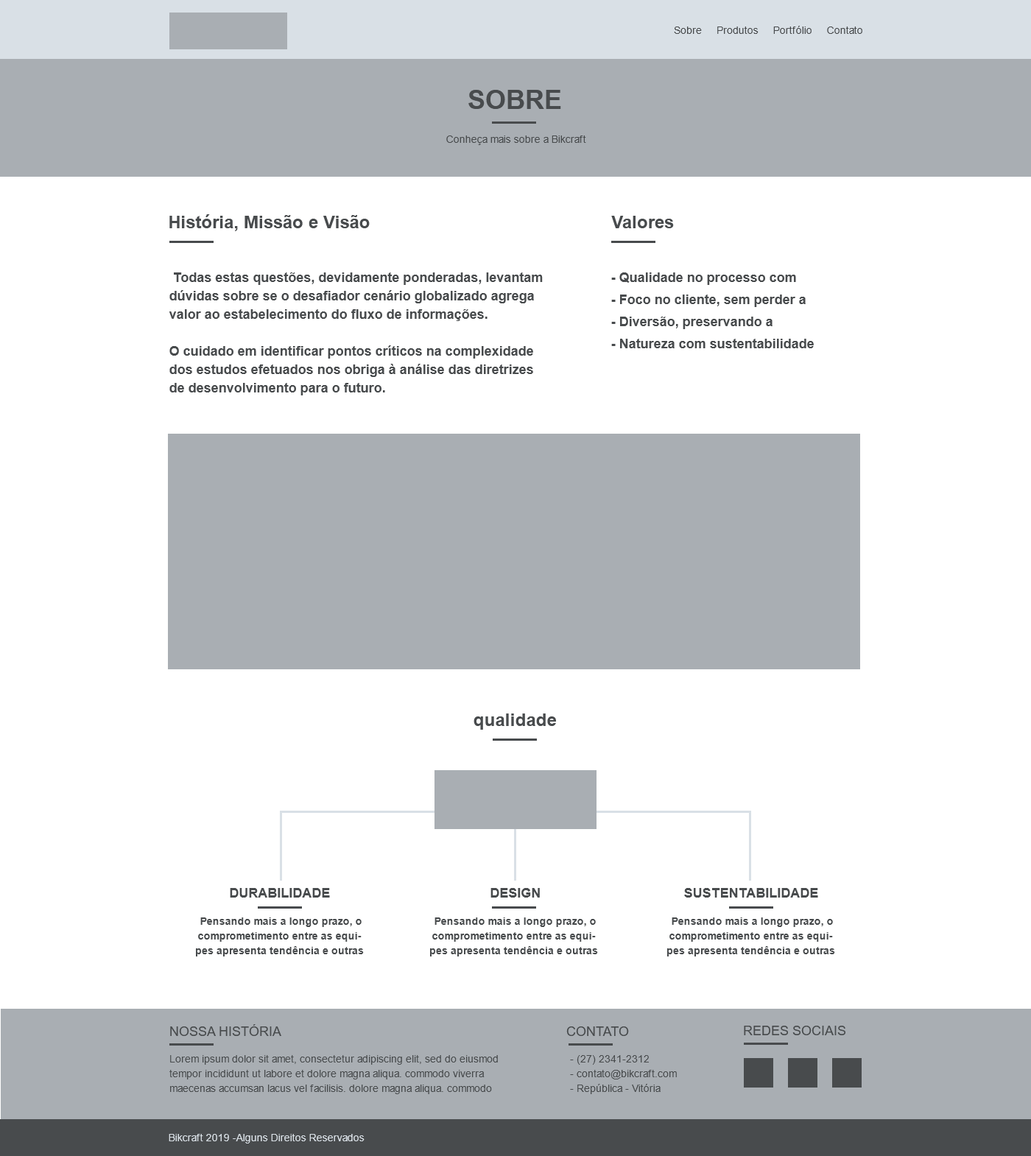
<style>
.page{position:relative;width:1031px;height:1156px;background:#ffffff}
.page>*{position:absolute;margin:0}
.t1{font:10.3px "ArialMT";color:#484b4d}
.t2{font:26.5px "Arial-BoldMT";color:#484b4d;text-transform:uppercase}
.t3{font:17.7px "Arial-BoldMT";color:#484b4d}
.t4{font:13.3px/18.4px "Arial-BoldMT";color:#484b4d}
.t5{font:13.3px/22.1px "Arial-BoldMT";color:#484b4d}
.t6{font:13.3px "Arial-BoldMT";color:#484b4d;text-transform:uppercase}
.t7{font:10.3px/14.7px "Arial-BoldMT";color:#484b4d}
.t8{font:13.3px "ArialMT";color:#484b4d;text-transform:uppercase}
.t9{font:10.3px/14.7px "ArialMT";color:#484b4d}
.t10{font:10.3px "ArialMT";color:#d9e0e6}
</style>
<div class="page">
<p class="t1" style="left:674px;top:26px;width:189px;height:8px">Sobre     Produtos     Portfólio     Contato</p>
<p class="t2" style="left:468px;top:90px;width:93px;height:19px">sobre</p>
<p class="t1" style="left:446px;top:136px;width:140px;height:9px">Conheça mais sobre a Bikcraft</p>
<p class="t3" style="left:169px;top:214px;width:201px;height:17px">História, Missão e Visão</p>
<p class="t3" style="left:611px;top:216px;width:63px;height:12px">Valores</p>
<p class="t4" style="left:169px;top:273px;width:374px;height:123px">Todas estas questões, devidamente ponderadas, levantam dúvidas sobre se o desafiador cenário globalizado agrega valor ao estabelecimento do fluxo de informações. <br><br>O cuidado em identificar pontos críticos na complexidade dos estudos efetuados nos obriga à análise das diretrizes de desenvolvimento para o futuro.</p>
<p class="t5" style="left:611px;top:273px;width:203px;height:75px">- Qualidade no processo com<br>- Foco no cliente, sem perder a<br>- Diversão, preservando a<br>- Natureza com sustentabilidade</p>
<p class="t3" style="left:474px;top:714px;width:82px;height:16px">qualidade</p>
<p class="t6" style="left:230px;top:888px;width:100px;height:10px">durabilidade</p>
<p class="t6" style="left:491px;top:888px;width:49px;height:10px">DESIGN</p>
<p class="t6" style="left:684px;top:888px;width:134px;height:10px">SUSTENTABILIDADE</p>
<p class="t7" style="left:196px;top:918px;width:168px;height:39px;text-align:center">Pensando mais a longo prazo, o comprometimento entre as equipes apresenta tendência e outras</p>
<p class="t7" style="left:430px;top:918px;width:168px;height:39px;text-align:center">Pensando mais a longo prazo, o comprometimento entre as equipes apresenta tendência e outras</p>
<p class="t7" style="left:667px;top:918px;width:168px;height:39px;text-align:center">Pensando mais a longo prazo, o comprometimento entre as equipes apresenta tendência e outras</p>
<p class="t8" style="left:170px;top:1025px;width:111px;height:11px">Nossa História</p>
<p class="t8" style="left:566px;top:1027px;width:63px;height:9px">contato</p>
<p class="t8" style="left:744px;top:1026px;width:102px;height:10px">redes sociais</p>
<p class="t9" style="left:169px;top:1055px;width:329px;height:40px">Lorem ipsum dolor sit amet, consectetur adipiscing elit, sed do eiusmod tempor incididunt ut labore et dolore magna aliqua. commodo viverra maecenas accumsan lacus vel facilisis. dolore magna aliqua. commodo</p>
<p class="t9" style="left:570px;top:1055px;width:107px;height:40px">- (27) 2341-2312<br> - contato@bikcraft.com<br> - República - Vitória</p>
<p class="t10" style="left:169px;top:1134px;width:196px;height:10px">Bikcraft 2019 -Alguns Direitos Reservados</p>
</div>
